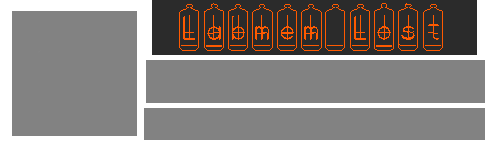
<style>
.page{position:relative;width:500px;height:150px;background:#828282}
.page>*{position:absolute;margin:0}
.t1{font:32px "BONX-TubeBold";color:#ff5a00}
</style>
<div class="page">
<p class="t1" style="left:179px;top:3px;width:264px;height:48px">Labmem Lost</p>
</div>
